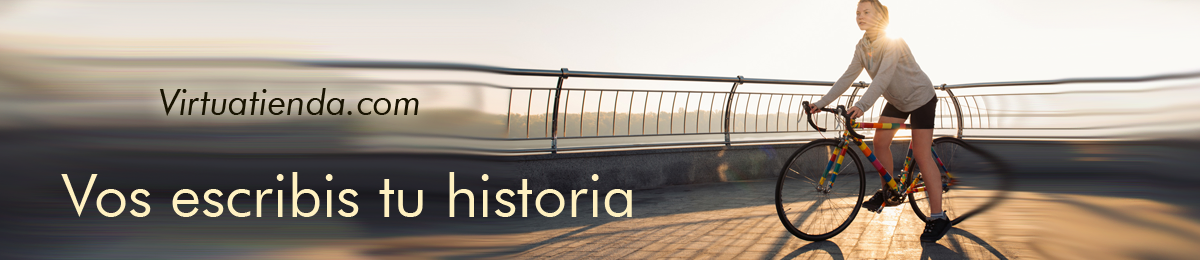
<style>
.page{position:relative;width:1200px;height:260px}
.page>*{position:absolute;margin:0}
.t1{font:36px "FuturaBT-BookItalic";color:#181301}
.t2{font:60px "FuturaBT-Book";color:#fff1c1}
</style>
<div class="page">
<p class="t1" style="left:159px;top:88px;width:260px;height:28px">Virtuatienda.com</p>
<p class="t2" style="left:61px;top:172px;width:571px;height:45px">Vos escribis tu historia</p>
</div>
